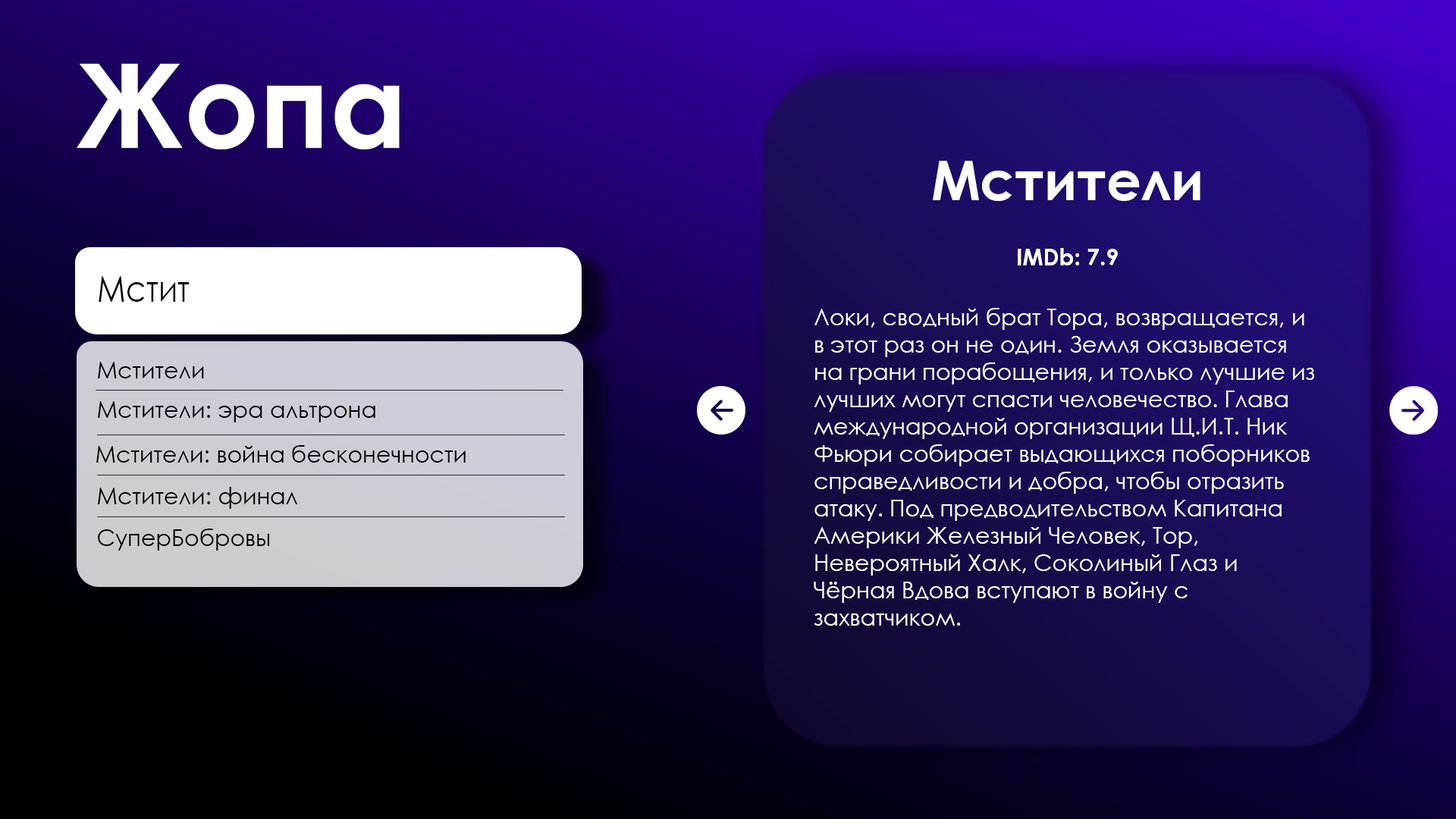
<style>
.page{position:relative;width:1456px;height:819px}
.page>*{position:absolute;margin:0}
.t1{font:116.9px "CenturyGothic-Bold";color:#ffffff}
.t2{font:54.6px "CenturyGothic-Bold";color:#ffffff}
.t3{font:22.7px "CenturyGothic-Bold";color:#ffffff}
.t4{font:36.4px "CenturyGothic";color:#000000;scale:0.86 1}
.t5{font:22.7px "CenturyGothic";color:#ffffff}
.t6{font:22.7px "CenturyGothic";color:#000000}
</style>
<div class="page">
<p class="t1" style="left:77px;top:64px;width:323px;height:85px">Жопа</p>
<p class="t2" style="left:933px;top:161px;width:267px;height:40px">Мстители</p>
<p class="t3" style="left:1018px;top:248px;width:100px;height:17px">IMDb: 7.9</p>
<p class="t4" style="left:99px;top:276px;width:90px;height:26px">Мстит</p>
<p class="t5" style="left:814px;top:308px;width:500px;height:318px">Локи, сводный брат Тора, возвращается, и в этот раз он не один. Земля оказывается на грани порабощения, и только лучшие из лучших могут спасти человечество. Глава международной организации Щ.И.Т. Ник Фьюри собирает выдающихся поборников справедливости и добра, чтобы отразить атаку. Под предводительством Капитана Америки Железный Человек, Тор, Невероятный Халк, Соколиный Глаз и Чёрная Вдова вступают в войну с захватчиком.</p>
<p class="t6" style="left:98px;top:362px;width:106px;height:16px">Мстители</p>
<p class="t6" style="left:98px;top:401px;width:277px;height:21px">Мстители: эра альтрона</p>
<p class="t6" style="left:96px;top:445px;width:370px;height:18px">Мстители: война бесконечности</p>
<p class="t6" style="left:98px;top:487px;width:200px;height:22px">Мстители: финал</p>
<p class="t6" style="left:98px;top:529px;width:172px;height:22px">СуперБобровы</p>
</div>
